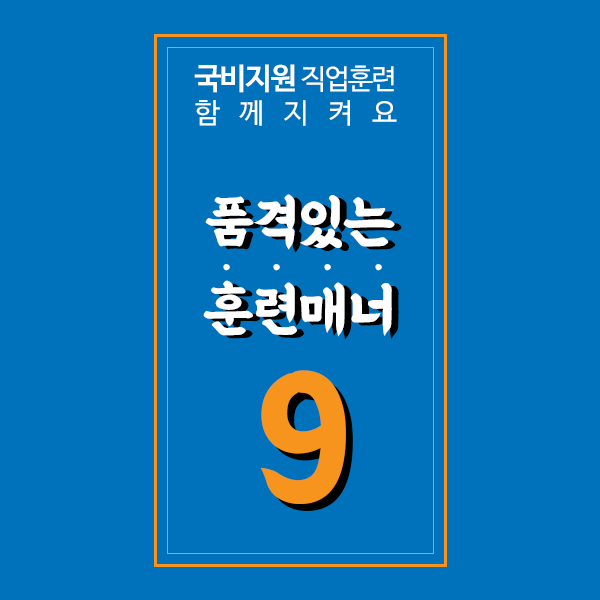
<style>
.page{position:relative;width:600px;height:600px;background:#0072bb}
.page>*{position:absolute;margin:0}
.t1{font:28.1px "NanumBarunGothic";letter-spacing:0.69em;color:#ffffff}
.t2{font:30.1px "NanumBarunGothicBold";letter-spacing:-0.05em;color:#ffffff}
.t3{font:28.1px "NanumBarunGothic";letter-spacing:-0.05em;color:#ffffff}
.t4{font:59px "BMEULJIRO";letter-spacing:-0.025em;color:#ffffff}
.t5{font:59px/88.5px "BMEULJIRO";letter-spacing:-0.025em;color:#ffffff}
.t6{font:59px "BMEULJIRO";letter-spacing:-0.025em}
.t7{font:59px/88.5px "BMEULJIRO";letter-spacing:-0.025em}
.t8{font:39.2px "BMEULJIRO";letter-spacing:-0.025em;color:#ffffff}
.t9{font:179.1px "BMEULJIRO";letter-spacing:-0.025em;color:#f7941d}
</style>
<div class="page">
<p class="t1" style="left:194px;top:64px;width:203px;height:62px;text-align:center"><span class="t2">국비지원 </span><span class="t3">직업훈련<br></span>함께지켜요</p>
<p class="t4" style="left:203px;top:194px;width:192px;height:143px;text-align:center">품격있는<br><span class="t5">훈련매너</span></p>
<p class="t6" style="left:210px;top:197px;width:192px;height:143px;text-align:center">품격있는<br><span class="t7">훈련매너</span></p>
<p class="t8" style="left:223px;top:264px;width:159px;height:7px">·    ·    ·    ·</p>
<p class="t9" style="left:260px;top:370px;width:86px;height:134px">9</p>
<p class="t9" style="left:267px;top:377px;width:86px;height:134px">9</p>
</div>
